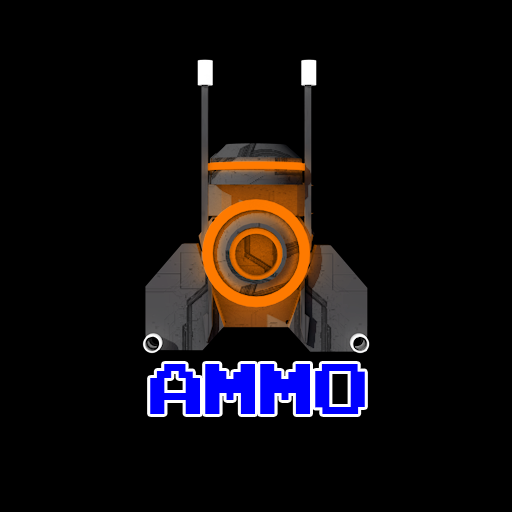
<style>
.page{position:relative;width:512px;height:512px;background:#000000}
.page>*{position:absolute;margin:0}
.t1{font:100px "ArcadeClassic";color:#0000ff}
</style>
<div class="page">
<p class="t1" style="left:150px;top:364px;width:215px;height:50px">Ammo</p>
</div>
